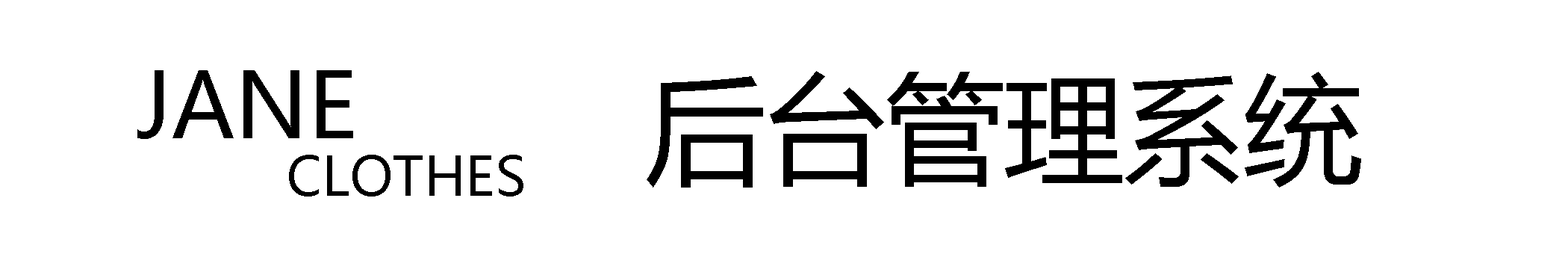
<style>
.page{position:relative;width:1568px;height:269px;background:#ffffff}
.page>*{position:absolute;margin:0}
.t1{font:89.6px "MicrosoftYaHei";color:#000000}
.t2{font:119.5px "MicrosoftYaHei";color:#000000}
.t3{font:53.8px "MicrosoftYaHei";color:#000000}
</style>
<div class="page">
<p class="t1" style="left:137px;top:70px;width:216px;height:69px">JANE</p>
<p class="t2" style="left:647px;top:71px;width:714px;height:116px">后台管理系统</p>
<p class="t3" style="left:289px;top:155px;width:234px;height:41px">CLOTHES</p>
</div>
